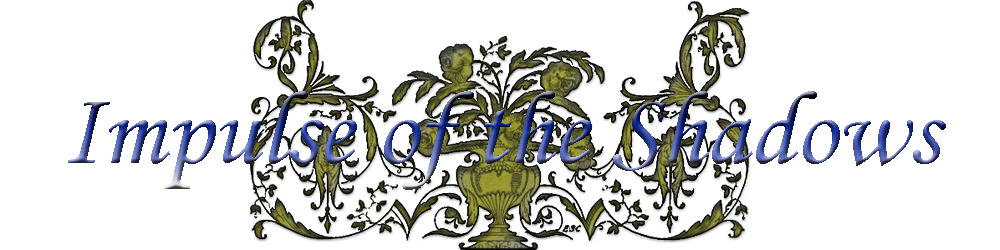
<style>
.page{position:relative;width:1000px;height:250px;background:#ffffff}
.page>*{position:absolute;margin:0}
.t1{font:104.2px "MonotypeCorsiva"}
</style>
<div class="page">
<p class="t1" style="left:68px;top:91px;width:878px;height:99px">Impulse of the Shadows</p>
</div>
